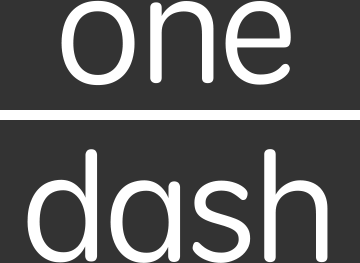
<style>
.page{position:relative;width:360px;height:263px;background:#333333}
.page>*{position:absolute;margin:0}
.t1{font:150px "STYuanti-SC-Regular";color:#ffffff}
</style>
<div class="page">
<p class="t1" style="left:61px;top:0px;width:230px;height:86px">one</p>
<p class="t1" style="left:27px;top:149px;width:301px;height:114px">dash</p>
</div>
